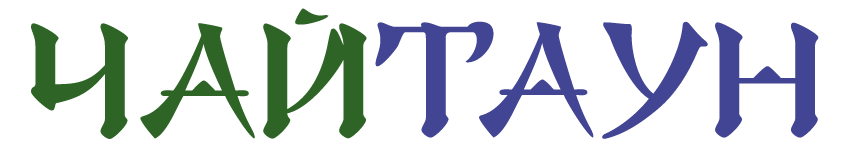
<style>
.page{position:relative;width:850px;height:150px;background:#ffffff}
.page>*{position:absolute;margin:0}
.t1{font:166.7px "EastAP";letter-spacing:0.025em;color:#2e6526;text-transform:uppercase}
.t2{font:166.7px "EastAP";letter-spacing:0.025em;color:#424593;text-transform:uppercase}
</style>
<div class="page">
<p class="t1" style="left:31px;top:8px;width:336px;height:131px">ЧАЙ</p>
<p class="t2" style="left:375px;top:21px;width:444px;height:118px">ТАУН</p>
</div>
